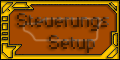
<style>
.page{position:relative;width:120px;height:60px;background:#a54900}
.page>*{position:absolute;margin:0}
.t1{font:18px "Small Fonts"}
</style>
<div class="page">
<p class="t1" style="left:17px;top:13px;width:92px;height:40px">Steuerungs<br>        Setup</p>
</div>
